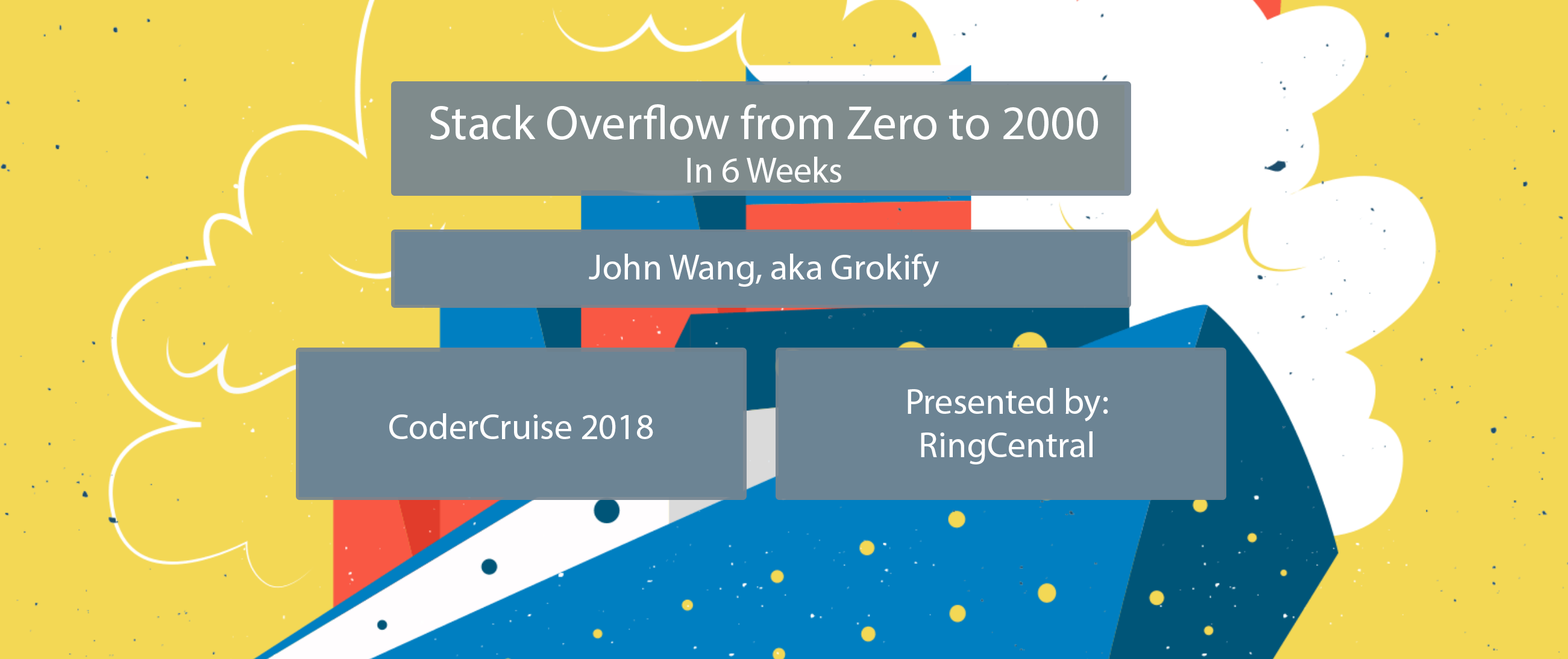
<style>
.page{position:relative;width:1568px;height:659px;background:#f3d855}
.page>*{position:absolute;margin:0}
.t1{font:48.2px "MyriadPro-Regular";color:#ffffff}
.t2{font:36.2px "MyriadPro-Regular";color:#ffffff}
</style>
<div class="page">
<p class="t1" style="left:430px;top:104px;width:668px;height:79px;text-align:center">Stack Overflow from Zero to 2000<br><span class="t2">In 6 Weeks</span></p>
<p class="t2" style="left:589px;top:254px;width:350px;height:33px">John Wang, aka Grokify</p>
<p class="t2" style="left:908px;top:388px;width:200px;height:77px;text-align:center">Presented by:<br>RingCentral</p>
<p class="t2" style="left:389px;top:413px;width:264px;height:26px">CoderCruise 2018</p>
</div>
